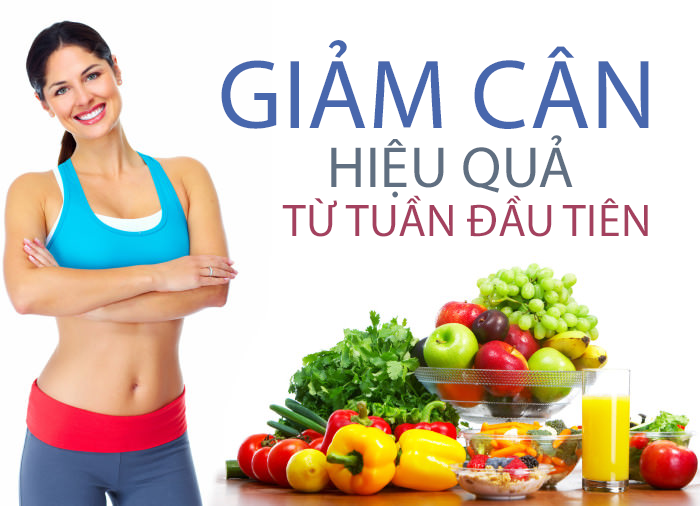
<style>
.page{position:relative;width:700px;height:506px;background:#ffffff}
.page>*{position:absolute;margin:0}
.t1{font:99px/383.3px "MyriadPro-Regular";letter-spacing:0.01em;color:#606f81}
.t2{font:99px/383.3px "MyriadPro-Regular";letter-spacing:0.01em;color:#4867ad}
.t3{font:58.3px "MyriadPro-Regular";letter-spacing:0.01em;color:#606f81}
.t4{font:45.8px "MyriadPro-Regular";letter-spacing:0.01em;color:#a4415f}
</style>
<div class="page">
<p class="t1" style="left:221px;top:40px;width:428px;height:89px;text-align:center"><span class="t2">GIẢM CÂN<br></span>ASDAS HHIE</p>
<p class="t3" style="left:331px;top:135px;width:242px;height:63px">HIỆU QUẢ</p>
<p class="t4" style="left:282px;top:195px;width:366px;height:42px">TỪ TUẦN ĐẦU TIÊN</p>
</div>
